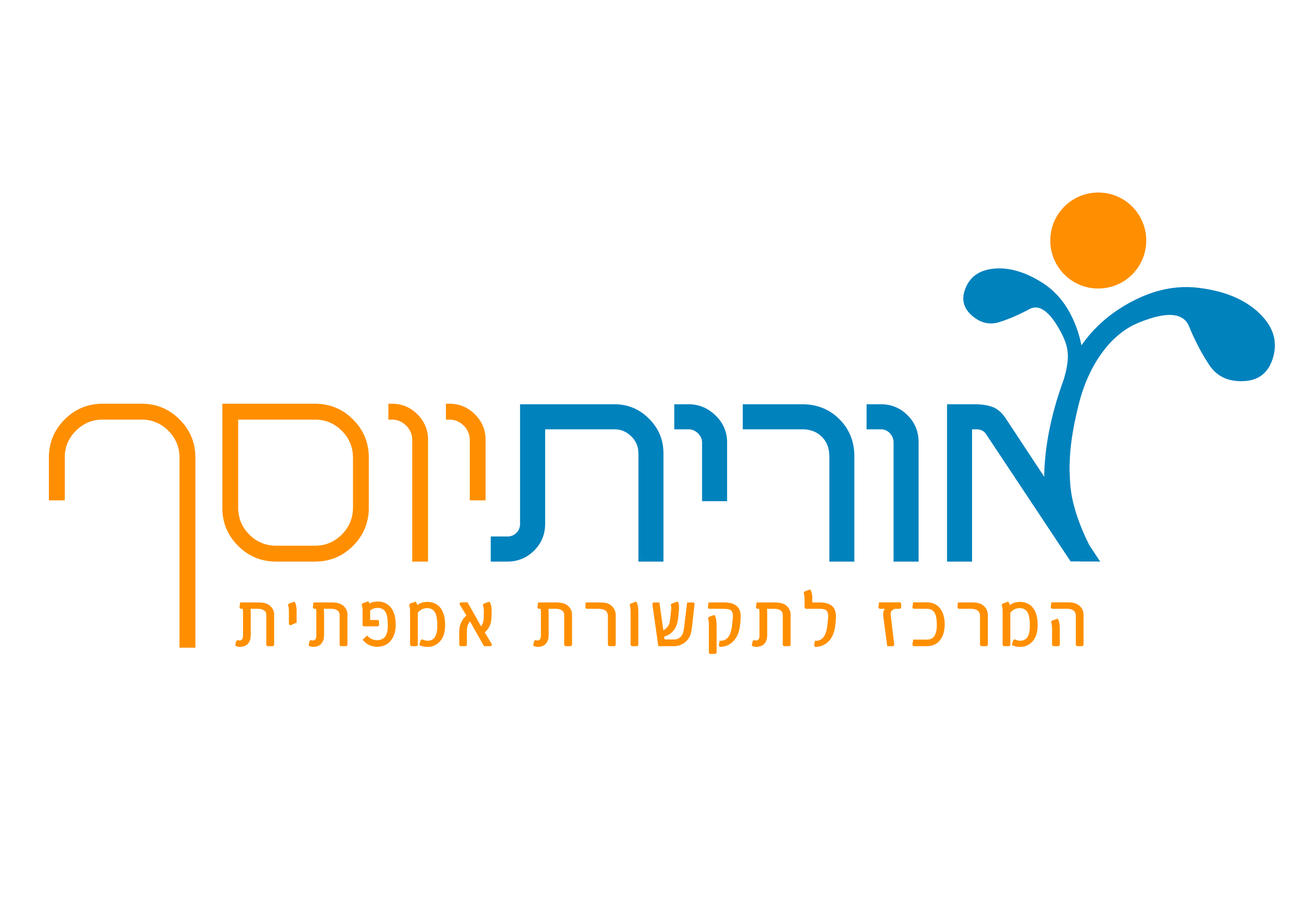
<style>
.page{position:relative;width:1305px;height:914px;background:#ffffff}
.page>*{position:absolute;margin:0}
.t1{font:79.3px "MeteorRegularMF";letter-spacing:0.08em;color:#ff8f00;font-weight:bold}
</style>
<div class="page">
<p class="t1" style="left:235px;top:589px;width:849px;height:65px">תיתפמא תרושקתל זכרמה</p>
</div>
